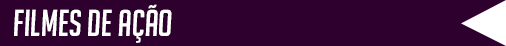
<style>
.page{position:relative;width:506px;height:46px;background:#2d002d}
.page>*{position:absolute;margin:0}
.t1{font:36.5px "BigNoodleTitling-Oblique";color:#ffffff}
</style>
<div class="page">
<p class="t1" style="left:14px;top:4px;width:158px;height:39px">Filmes de Ação</p>
</div>
